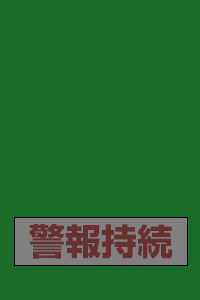
<style>
.page{position:relative;width:200px;height:300px;background:#1a6d28}
.page>*{position:absolute;margin:0}
.t1{font:36px "ShinGoPro-Bold";color:#683030}
</style>
<div class="page">
<p class="t1" style="left:29px;top:223px;width:144px;height:36px">警報持続</p>
</div>
